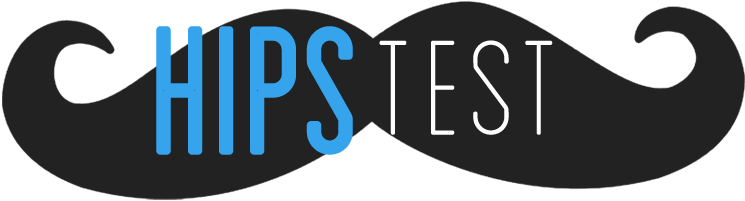
<style>
.page{position:relative;width:745px;height:201px;background:#222222}
.page>*{position:absolute;margin:0}
.t1{font:189.8px "Blanch-CondensedInline";letter-spacing:-0.01em;color:#35a4ed;font-weight:bold}
.t2{font:186.3px "Blanch-CapsLight";letter-spacing:-0.01em;color:#ffffff;font-weight:bold}
</style>
<div class="page">
<p class="t1" style="left:156px;top:26px;width:197px;height:129px">hips</p>
<p class="t2" style="left:379px;top:40px;width:174px;height:95px">test</p>
</div>
